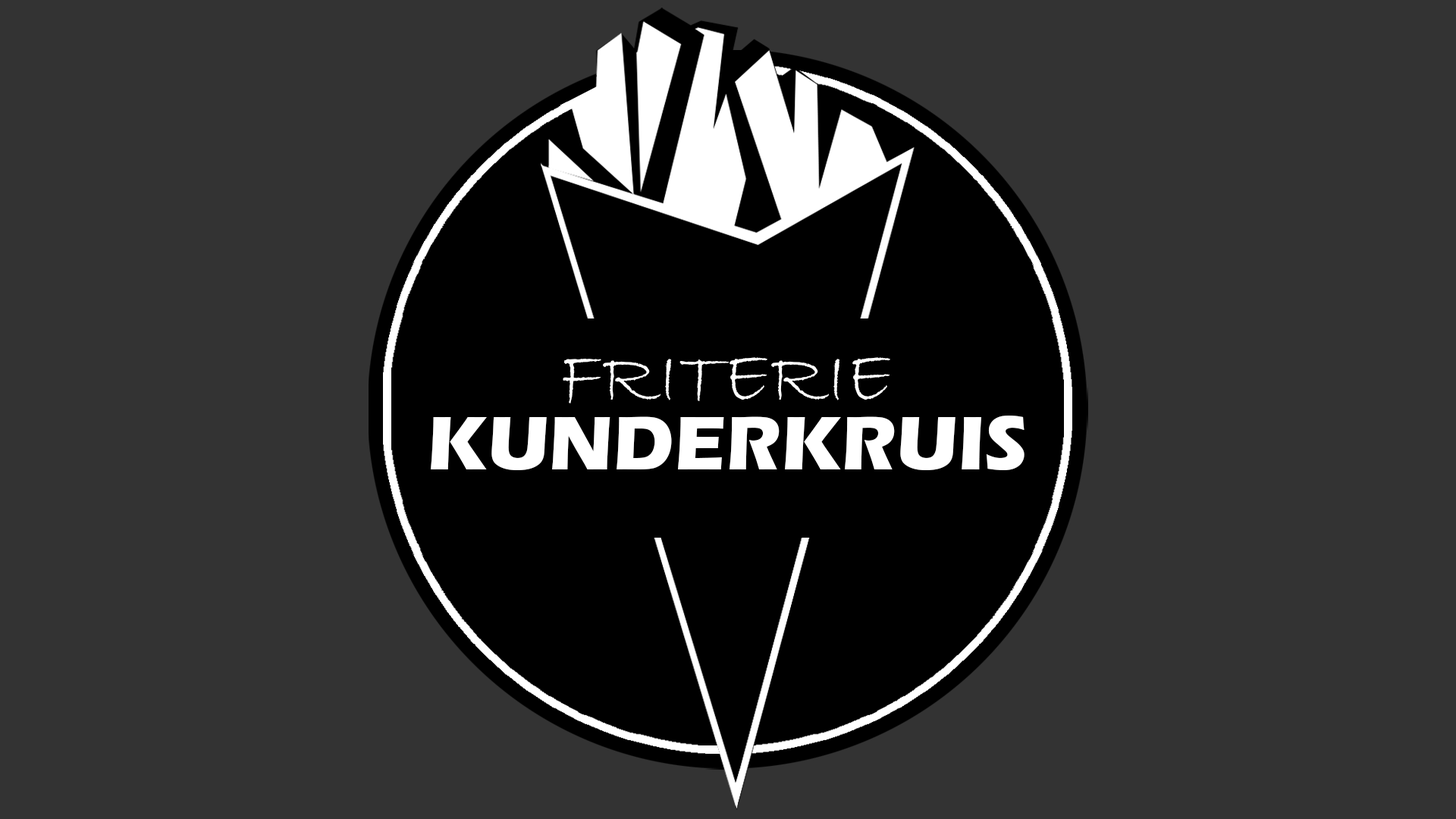
<style>
.page{position:relative;width:1456px;height:819px;background:#333333}
.page>*{position:absolute;margin:0}
.t1{font:76.8px "BradleyHandITC";color:#ffffff}
.t2{font:78.7px "ErasITC-Bold";color:#ffffff}
</style>
<div class="page">
<p class="t1" style="left:563px;top:357px;width:327px;height:46px">FRITERIE</p>
<p class="t2" style="left:431px;top:416px;width:593px;height:54px">KUNDERKRUIS</p>
</div>
